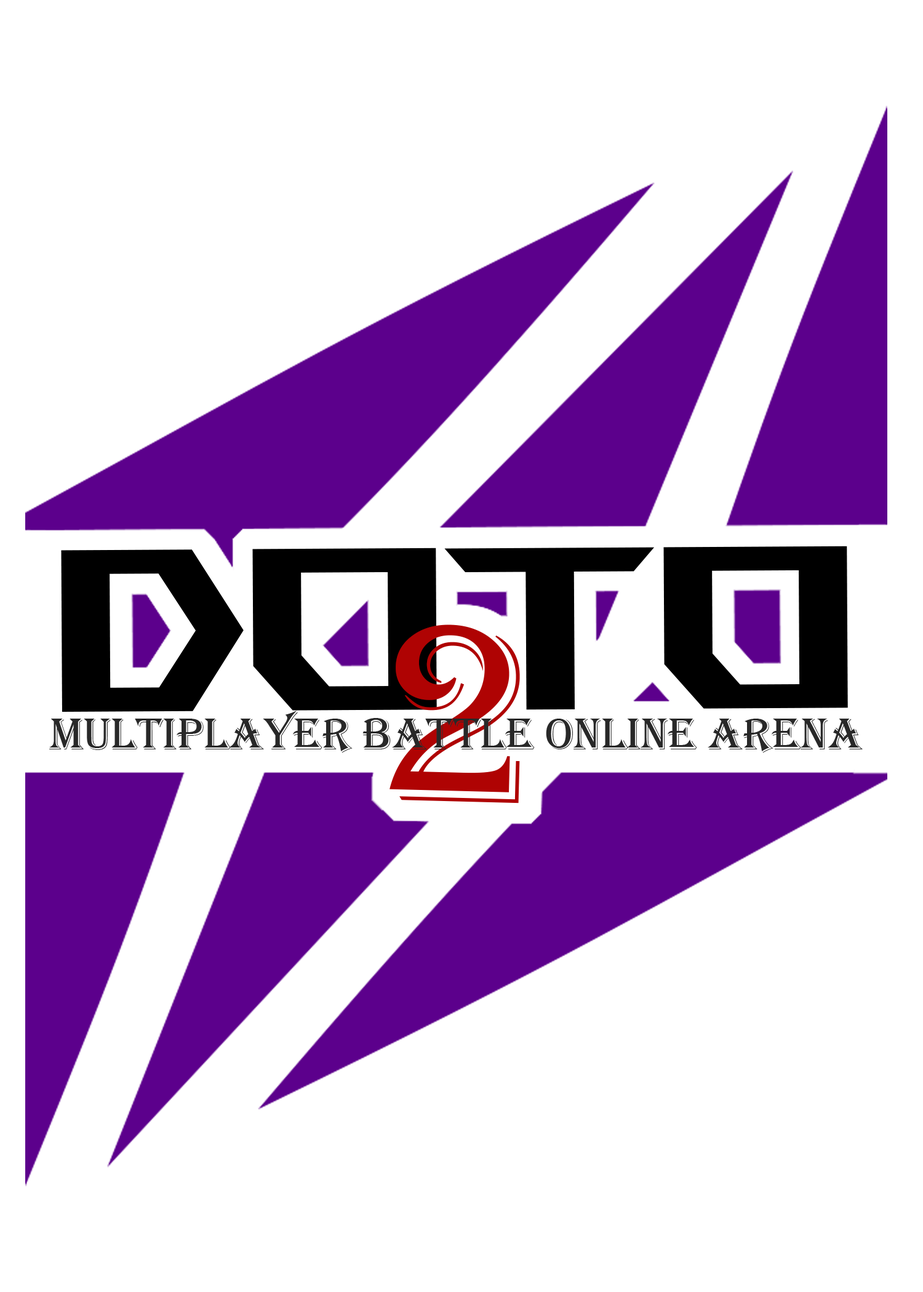
<style>
.page{position:relative;width:923px;height:1292px;background:#ffffff}
.page>*{position:absolute;margin:0}
.t1{font:230.7px "ROGFonts-Regular";color:#000000}
.t2{font:262.7px "Algerian";color:#af0303}
.t3{font:45.9px "Algerian";color:#282828}
</style>
<div class="page">
<p class="t1" style="left:61px;top:546px;width:787px;height:166px">DOTO</p>
<p class="t2" style="left:389px;top:624px;width:131px;height:180px;rotate:1deg">2</p>
<p class="t3" style="left:49px;top:711px;width:814px;height:42px">multiplayer battle online arena</p>
</div>
